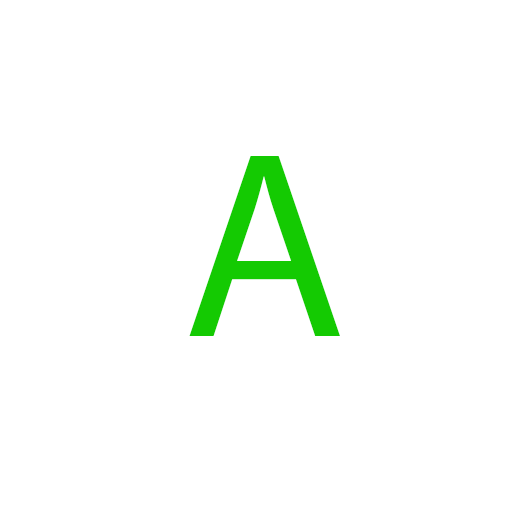
<style>
.page{position:relative;width:512px;height:512px;background:#ffffff}
.page>*{position:absolute;margin:0}
.t1{font:266.7px "MyriadPro-Regular";color:#14ca02}
</style>
<div class="page">
<p class="t1" style="left:189px;top:156px;width:151px;height:180px">A</p>
</div>
